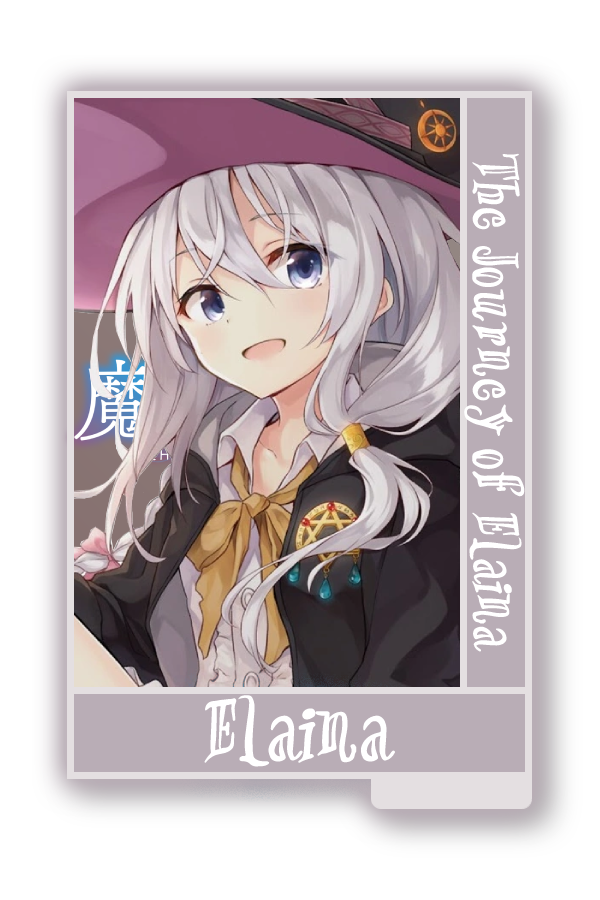
<style>
.page{position:relative;width:600px;height:900px;background:#ffffff}
.page>*{position:absolute;margin:0}
.t1{font:54.7px "SYBILWITCHRegular";color:#ffffff}
.t2{font:75px "SYBILWITCHRegular";color:#ffffff}
</style>
<div class="page">
<p class="t1" style="left:464px;top:153px;width:61px;height:499px;rotate:90deg">The Journey of Elaina</p>
<p class="t2" style="left:204px;top:695px;width:192px;height:72px">Elaina</p>
</div>
